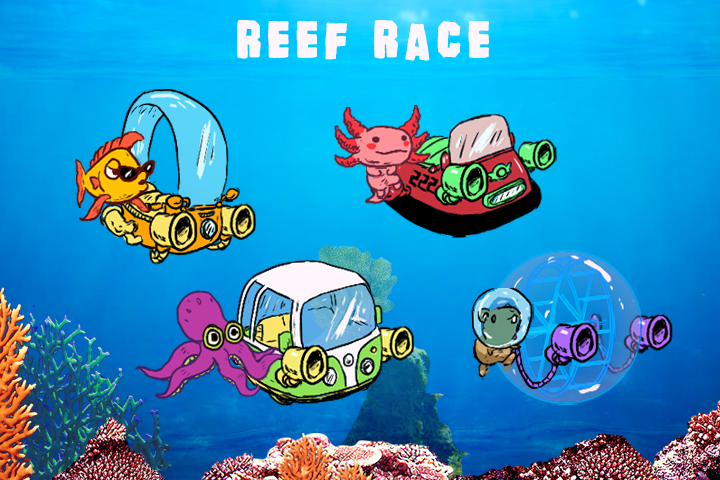
<style>
.page{position:relative;width:720px;height:480px}
.page>*{position:absolute;margin:0}
.t1{font:43.4px "-banhart-black-";color:#fff5fd;font-weight:bold}
</style>
<div class="page">
<p class="t1" style="left:237px;top:20px;width:252px;height:41px">Reef race</p>
</div>
